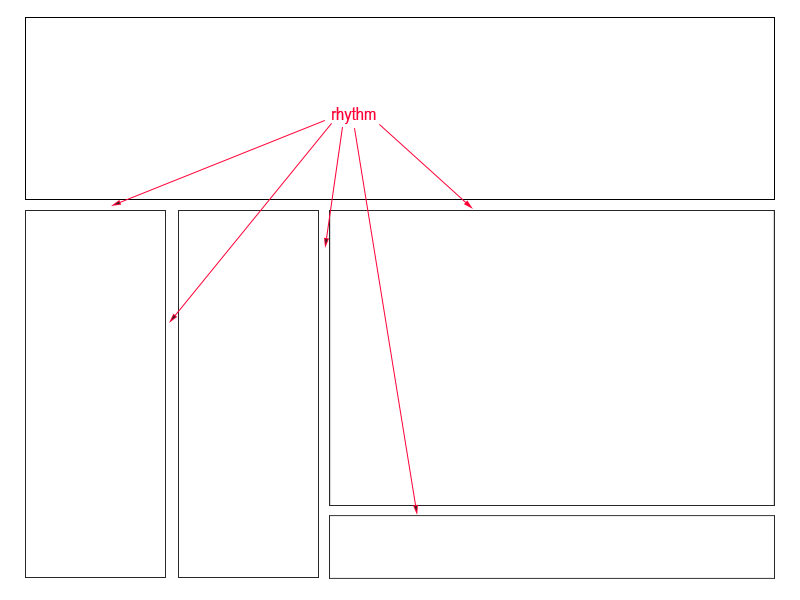
<style>
.page{position:relative;width:800px;height:600px;background:#ffffff}
.page>*{position:absolute;margin:0}
.t1{font:18px "ArialNarrow";color:#fe0036}
</style>
<div class="page">
<p class="t1" style="left:332px;top:107px;width:44px;height:17px">rhythm</p>
</div>
